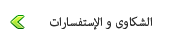
<style>
.page{position:relative;width:170px;height:43px;background:#ffffff}
.page>*{position:absolute;margin:0}
.t1{font:17px "AdobeArabic-Regular";color:#2f2f2f}
</style>
<div class="page">
<p class="t1" style="left:50px;top:16px;width:102px;height:14px">الشكاوى و الإستفسارات</p>
</div>
